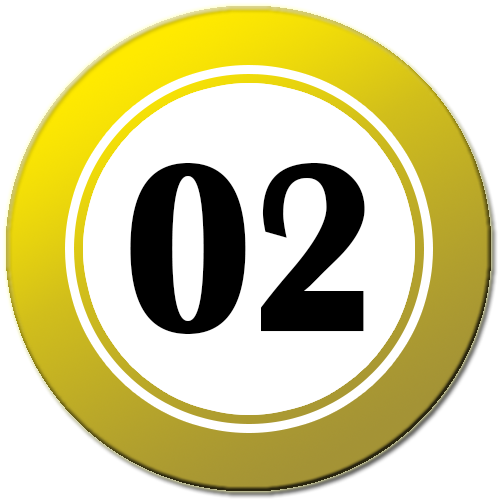
<style>
.page{position:relative;width:500px;height:500px;background:#ffffff}
.page>*{position:absolute;margin:0}
.t1{font:248px "BritannicBold";color:#000000;scale:0.83 1}
</style>
<div class="page">
<p class="t1" style="left:130px;top:162px;width:235px;height:172px">02</p>
</div>
